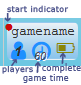
<style>
.page{position:relative;width:81px;height:85px;background:#ffffff}
.page>*{position:absolute;margin:0}
.t1{font:8px "Verdana";letter-spacing:0.04em;color:#495089}
.t2{font:8.8px "Verdana";letter-spacing:0.04em;color:#495089;scale:0.91 1}
</style>
<div class="page">
<p class="t1" style="left:7px;top:5px;width:62px;height:8px">start indicator</p>
<p class="t1" style="left:2px;top:65px;width:31px;height:9px">players</p>
<p class="t2" style="left:23px;top:74px;width:46px;height:9px">game time</p>
</div>
